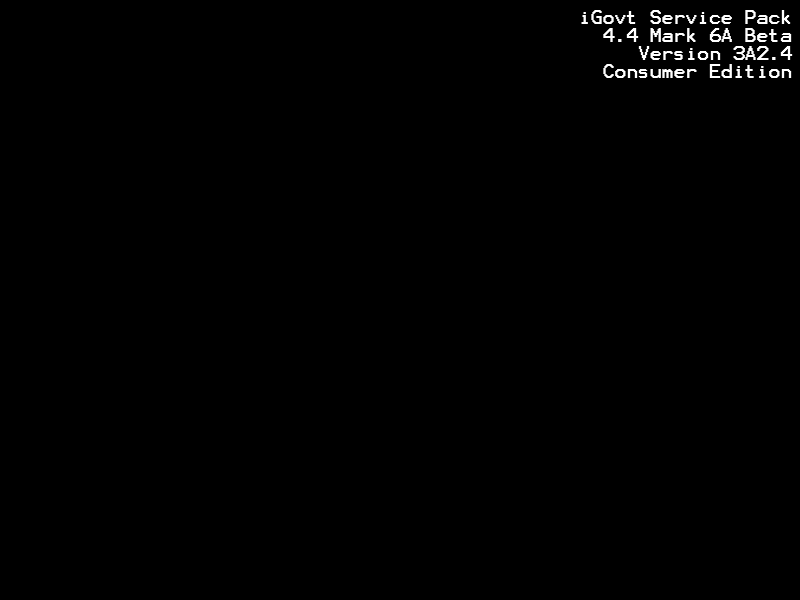
<style>
.page{position:relative;width:800px;height:600px;background:#000000}
.page>*{position:absolute;margin:0}
.t1{font:16px/18px "Terminal";letter-spacing:-0.01em;color:#ffffff}
</style>
<div class="page">
<p class="t1" style="left:581px;top:10px;width:212px;height:68px;text-align:right">iGovt Service Pack 4.4 Mark 6A Beta Version 3A2.4<br>Consumer Edition</p>
</div>
